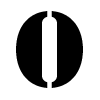
<style>
.page{position:relative;width:100px;height:100px;background:#ffffff}
.page>*{position:absolute;margin:0}
.t1{font:100px "StencilStd";color:#000000}
</style>
<div class="page">
<p class="t1" style="left:16px;top:11px;width:67px;height:77px">O</p>
</div>
